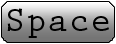
<style>
.page{position:relative;width:116px;height:44px}
.page>*{position:absolute;margin:0}
.t1{font:36px "PrestigeEliteStd-Bd";color:#000000}
</style>
<div class="page">
<p class="t1" style="left:7px;top:8px;width:102px;height:30px">Space</p>
</div>
